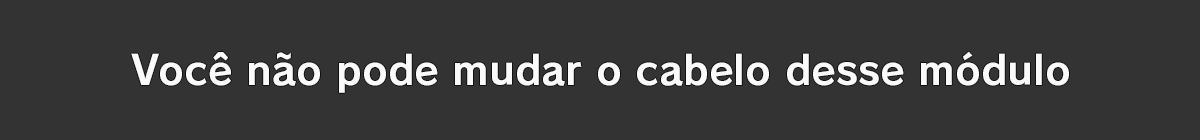
<style>
.page{position:relative;width:1200px;height:140px;background:#333333}
.page>*{position:absolute;margin:0}
.t1{font:40px "RodinPro-B";color:#fbfafb}
</style>
<div class="page">
<p class="t1" style="left:131px;top:51px;width:938px;height:42px">Você não pode mudar o cabelo desse módulo</p>
</div>
